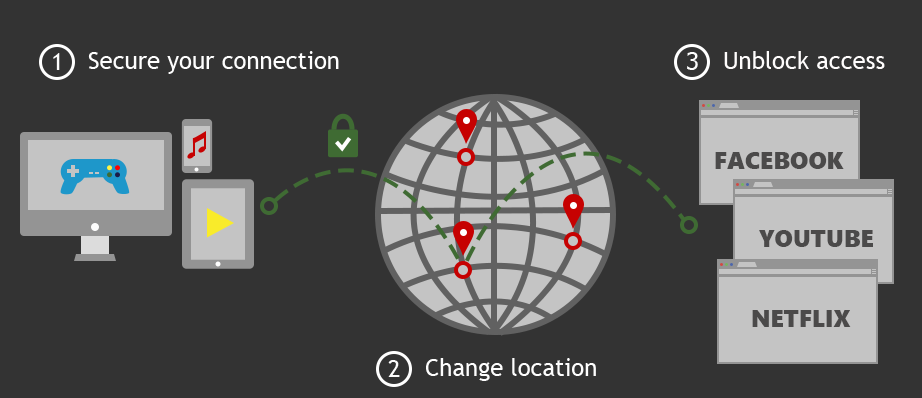
<style>
.page{position:relative;width:922px;height:398px;background:#333333}
.page>*{position:absolute;margin:0}
.t1{font:24px "TrebuchetMS";color:#fefefe}
.t2{font:24px "Tahoma";color:#fefefe}
.t3{font:24px "TrebuchetMS";color:#fffdfd}
.t4{font:24px "SegoeUIBlack";color:#4b4a4a}
</style>
<div class="page">
<p class="t1" style="left:53px;top:53px;width:7px;height:17px">1</p>
<p class="t1" style="left:88px;top:51px;width:251px;height:23px">Secure your connection</p>
<p class="t2" style="left:687px;top:52px;width:11px;height:18px">3</p>
<p class="t3" style="left:724px;top:51px;width:161px;height:18px">Unblock access</p>
<p class="t4" style="left:715px;top:152px;width:129px;height:17px">FACEBOOK</p>
<p class="t4" style="left:759px;top:230px;width:114px;height:17px">YOUTUBE</p>
<p class="t4" style="left:752px;top:310px;width:99px;height:17px">NETFLIX</p>
<p class="t1" style="left:388px;top:360px;width:12px;height:17px">2</p>
<p class="t1" style="left:426px;top:358px;width:170px;height:23px">Change location</p>
</div>
